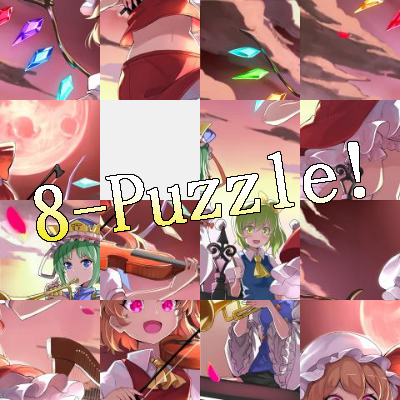
<style>
.page{position:relative;width:400px;height:400px}
.page>*{position:absolute;margin:0}
.t1{font:73.3px "DFKaiShu-SB-Estd-BF";font-weight:bold}
</style>
<div class="page">
<p class="t1" style="left:34px;top:142px;width:331px;height:99px;rotate:-8deg">8-Puzzle!</p>
</div>
